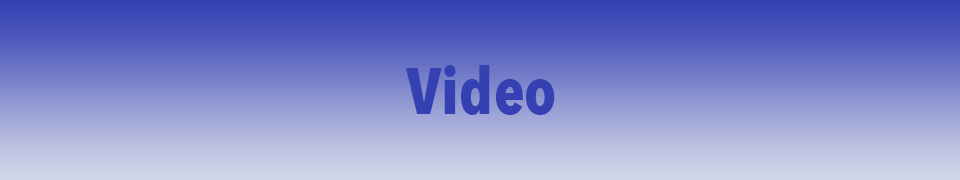
<style>
.page{position:relative;width:960px;height:180px}
.page>*{position:absolute;margin:0}
.t1{font:65px "AvenirNextCondensed-Bold";color:#3541b3}
</style>
<div class="page">
<p class="t1" style="left:405px;top:65px;width:150px;height:50px">Video</p>
</div>
